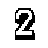
<style>
.page{position:relative;width:48px;height:48px;background:#ffffff}
.page>*{position:absolute;margin:0}
.t1{font:36px "KarmaFuture-Regular";color:#010101}
</style>
<div class="page">
<p class="t1" style="left:15px;top:8px;width:20px;height:32px">2</p>
</div>
